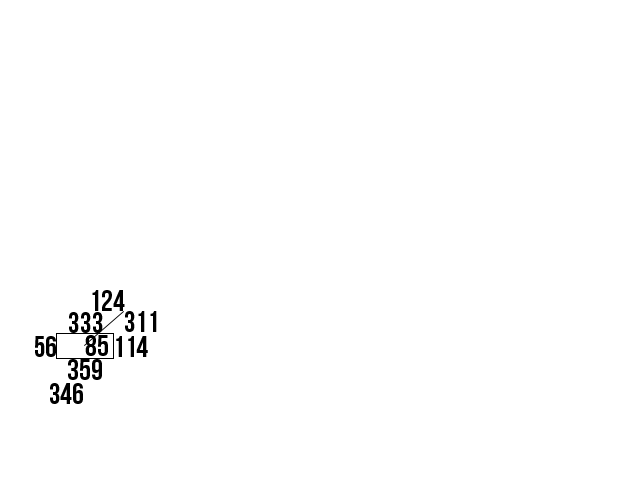
<style>
.page{position:relative;width:641px;height:486px;background:#ffffff}
.page>*{position:absolute;margin:0}
.t1{font:30px "BebasNeue";color:#000000}
</style>
<div class="page">
<p class="t1" style="left:92px;top:290px;width:33px;height:21px">124</p>
<p class="t1" style="left:69px;top:312px;width:34px;height:21px">333</p>
<p class="t1" style="left:125px;top:311px;width:32px;height:21px">311</p>
<p class="t1" style="left:35px;top:336px;width:113px;height:21px">56            114</p>
<p class="t1" style="left:85px;top:335px;width:23px;height:21px">85</p>
<p class="t1" style="left:68px;top:359px;width:34px;height:21px">359</p>
<p class="t1" style="left:50px;top:383px;width:33px;height:21px">346</p>
</div>
